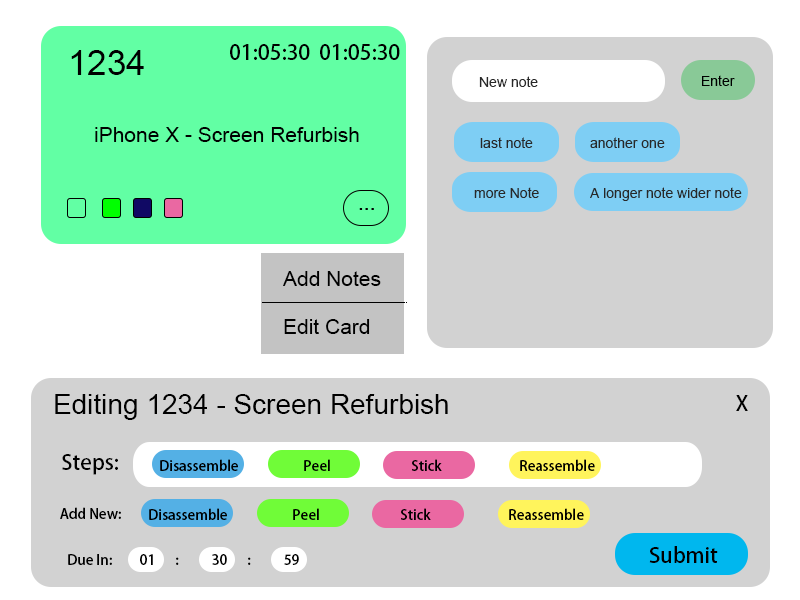
<style>
.page{position:relative;width:800px;height:600px;background:#d2d2d2}
.page>*{position:absolute;margin:0}
.t1{font:60px "ArialMT";color:#000000}
.t2{font:36px "AdobeHeitiStd-Regular";color:#000000}
.t3{font:24px "ArialMT";color:#282828}
.t4{font:24px "ArialMT";color:#000000}
.t5{font:36px "ArialMT";color:#000000}
.t6{font:36px/24px "ArialMT";color:#000000}
.t7{font:48px "ArialMT";color:#000000}
.t8{font:24px "AdobeHeitiStd-Regular";color:#000000}
</style>
<div class="page">
<p class="t1" style="left:71px;top:50px;width:73px;height:25px">1234</p>
<p class="t2" style="left:230px;top:44px;width:80px;height:16px">01:05:30</p>
<p class="t2" style="left:320px;top:44px;width:80px;height:16px">01:05:30</p>
<p class="t3" style="left:479px;top:76px;width:59px;height:11px">New note</p>
<p class="t4" style="left:702px;top:75px;width:33px;height:11px">Enter</p>
<p class="t5" style="left:95px;top:127px;width:264px;height:15px">iPhone X - Screen Refurbish</p>
<p class="t3" style="left:480px;top:137px;width:53px;height:11px">last note</p>
<p class="t3" style="left:590px;top:137px;width:75px;height:11px">another one</p>
<p class="t3" style="left:474px;top:187px;width:65px;height:11px">more Note</p>
<p class="t3" style="left:590px;top:187px;width:152px;height:14px">A longer note wider note</p>
<p class="t6" style="left:283px;top:271px;width:98px;height:63px">Add Notes<br><br>Edit Card</p>
<p class="t7" style="left:55px;top:394px;width:393px;height:26px">Editing 1234 - Screen Refurbish</p>
<p class="t2" style="left:736px;top:395px;width:12px;height:16px">X</p>
<p class="t2" style="left:62px;top:454px;width:56px;height:21px">Steps:</p>
<p class="t8" style="left:160px;top:459px;width:435px;height:12px">Disassemble   Peel   Stick   Reassemble</p>
<p class="t8" style="left:60px;top:507px;width:61px;height:12px">Add New:</p>
<p class="t8" style="left:149px;top:508px;width:435px;height:12px">Disassemble   Peel   Stick   Reassemble</p>
<p class="t8" style="left:68px;top:554px;width:231px;height:11px">Due In:  01 : 30 : 59</p>
<p class="t2" style="left:649px;top:546px;width:69px;height:17px">Submit</p>
</div>
